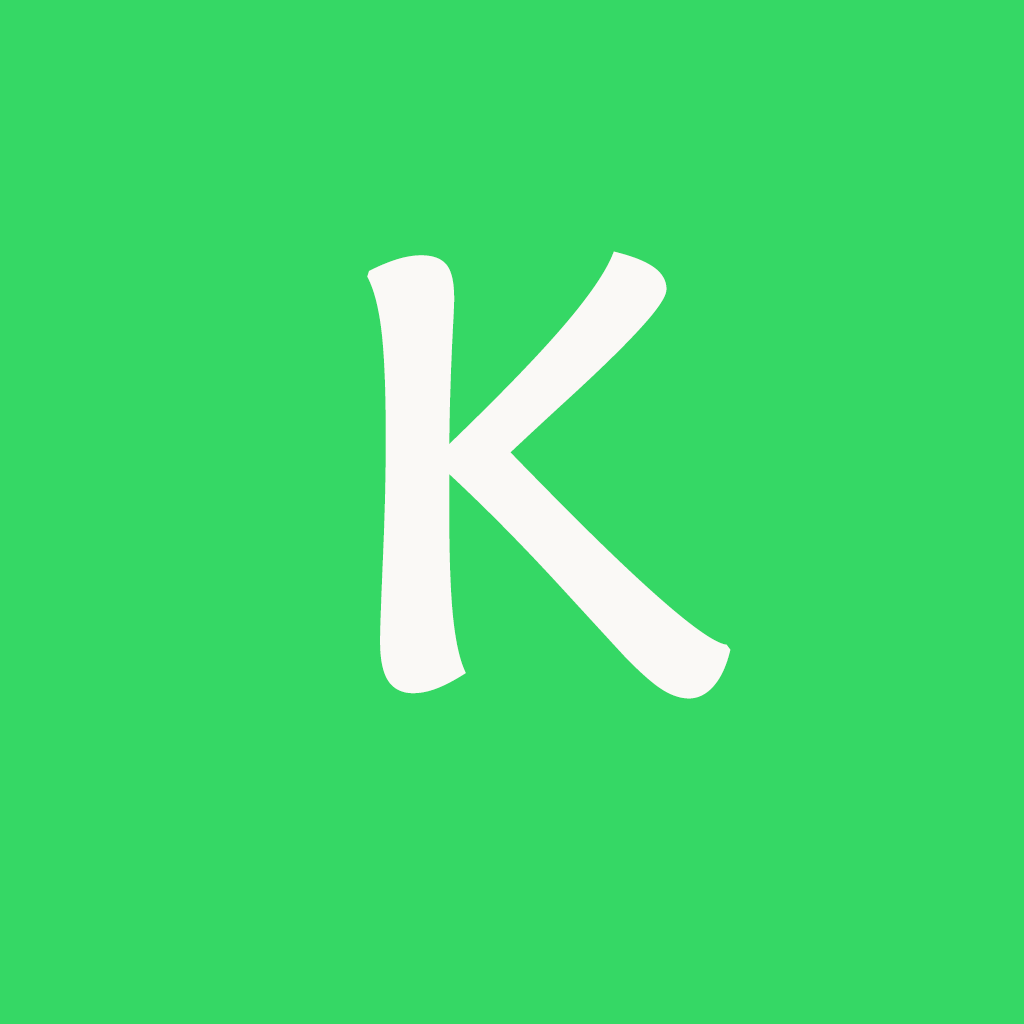
<style>
.page{position:relative;width:1024px;height:1024px;background:#35d865}
.page>*{position:absolute;margin:0}
.t1{font:610px "MaiandraGD-Regular";color:#faf9f6;font-weight:bold}
</style>
<div class="page">
<p class="t1" style="left:367px;top:251px;width:364px;height:448px">K</p>
</div>
